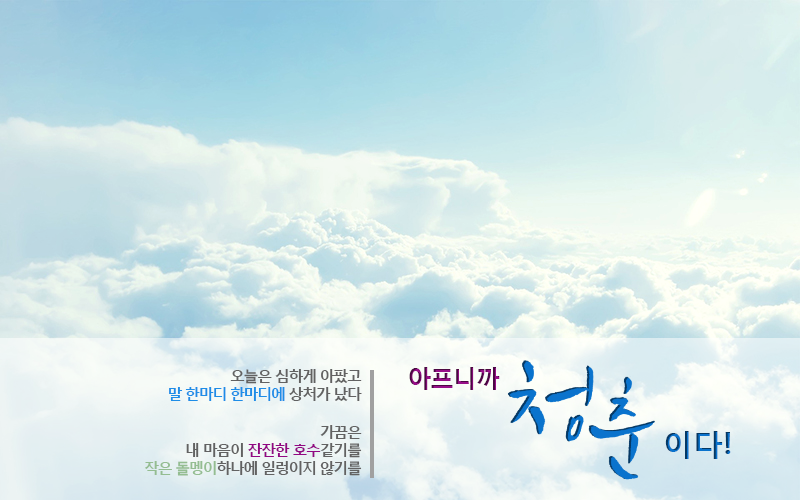
<style>
.page{position:relative;width:800px;height:500px}
.page>*{position:absolute;margin:0}
.t1{font:15px "MalgunGothicBold";letter-spacing:-0.09em;color:#626262}
.t2{font:15px "MalgunGothicBold";letter-spacing:-0.09em;color:#1e8de7}
.t3{font:24px "MalgunGothicBold";letter-spacing:-0.05em}
.t4{font:15px "MalgunGothicBold";letter-spacing:-0.09em;color:#920783}
.t5{font:15px "MalgunGothicBold";letter-spacing:-0.09em;color:#94bd91}
.t6{font:30px "MalgunGothicBold"}
</style>
<div class="page">
<p class="t1" style="left:169px;top:369px;width:193px;height:32px;text-align:right">오늘은 심하게 아팠고<br><span class="t2">말 한마디 한마디에 </span>상처가 났다</p>
<p class="t3" style="left:409px;top:367px;width:91px;height:23px">아프니까</p>
<p class="t1" style="left:145px;top:425px;width:217px;height:51px;text-align:right">가끔은<br>내 마음이 <span class="t4">잔잔한 호수</span>같기를<br><span class="t5">작은 돌멩이</span>하나에 일렁이지 않기를</p>
<p class="t6" style="left:665px;top:431px;width:66px;height:28px">이다!</p>
</div>
